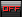
<style>
.page{position:relative;width:22px;height:17px}
.page>*{position:absolute;margin:0}
.t1{font:8px "microN55";letter-spacing:0.01em;color:#ff2d2d}
</style>
<div class="page">
<p class="t1" style="left:3px;top:6px;width:17px;height:5px">off</p>
</div>
